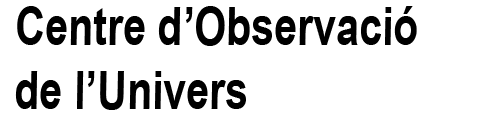
<style>
.page{position:relative;width:500px;height:119px;background:#ffffff}
.page>*{position:absolute;margin:0}
.t1{font:52.9px "Arial-BoldMT";color:#000000;scale:0.78 1}
</style>
<div class="page">
<p class="t1" style="left:15px;top:6px;width:402px;height:104px">Centre d’Observació<br>de l’Univers</p>
</div>
